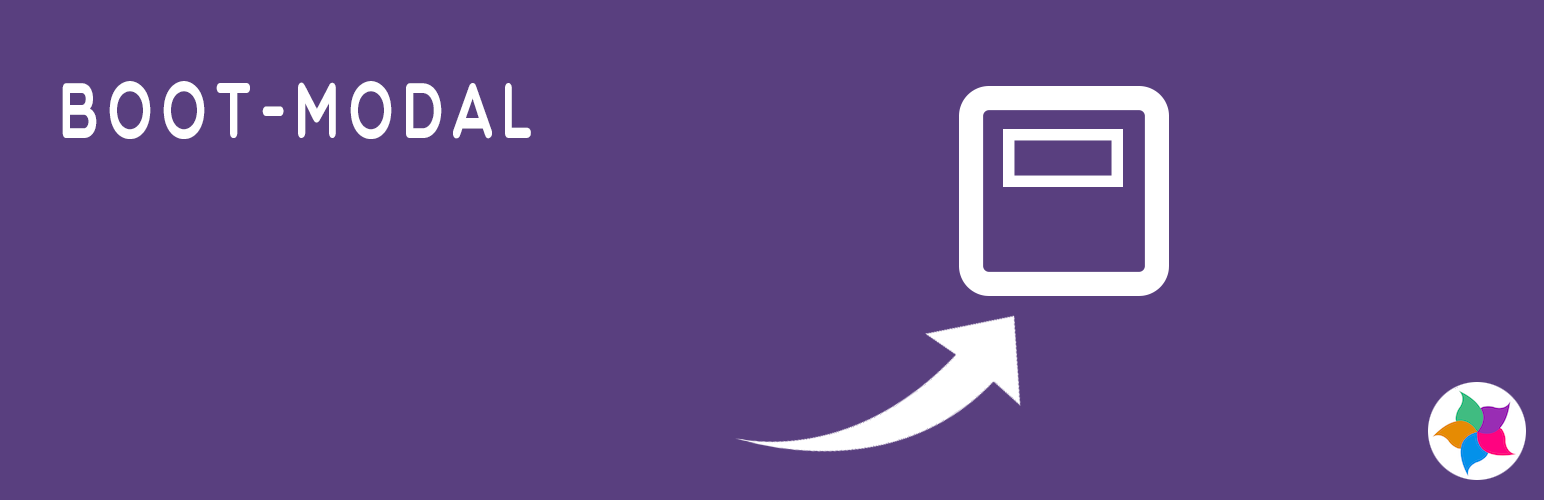
<style>
.page{position:relative;width:1544px;height:500px;background:#593f7f}
.page>*{position:absolute;margin:0}
.t1{font:79px "Multicolore";letter-spacing:0.148em;color:#ffffff;scale:0.7 1}
</style>
<div class="page">
<p class="t1" style="left:62px;top:81px;width:469px;height:58px">Boot-Modal</p>
</div>
